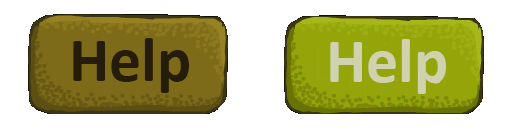
<style>
.page{position:relative;width:512px;height:128px;background:#ffffff}
.page>*{position:absolute;margin:0}
.t1{font:64px "Calibri-Bold";color:#251d09}
.t2{font:64px "Calibri-Bold";color:#cfd2ad}
</style>
<div class="page">
<p class="t1" style="left:73px;top:38px;width:116px;height:55px">Help</p>
<p class="t2" style="left:330px;top:39px;width:116px;height:55px">Help</p>
</div>
